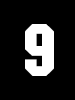
<style>
.page{position:relative;width:75px;height:100px;background:#000000}
.page>*{position:absolute;margin:0}
.t1{font:72px "MachineStd";color:#ffffff}
</style>
<div class="page">
<p class="t1" style="left:25px;top:24px;width:29px;height:52px">9</p>
</div>
